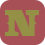
<style>
.page{position:relative;width:45px;height:45px;background:#a75157}
.page>*{position:absolute;margin:0}
.t1{font:50px "Saddlebag-Black";color:#949146}
</style>
<div class="page">
<p class="t1" style="left:5px;top:10px;width:34px;height:26px">N</p>
</div>
